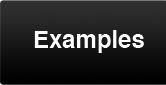
<style>
.page{position:relative;width:166px;height:85px}
.page>*{position:absolute;margin:0}
.t1{font:24px "Helvetica-Bold";color:#ffffff}
</style>
<div class="page">
<p class="t1" style="left:34px;top:30px;width:110px;height:23px">Examples</p>
</div>
